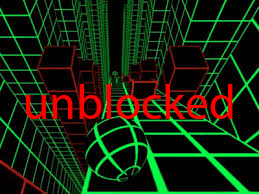
<style>
.page{position:relative;width:259px;height:194px}
.page>*{position:absolute;margin:0}
.t1{font:48px "MyriadPro-Regular";color:#ff0000}
</style>
<div class="page">
<p class="t1" style="left:26px;top:84px;width:207px;height:35px">unblocked</p>
</div>
